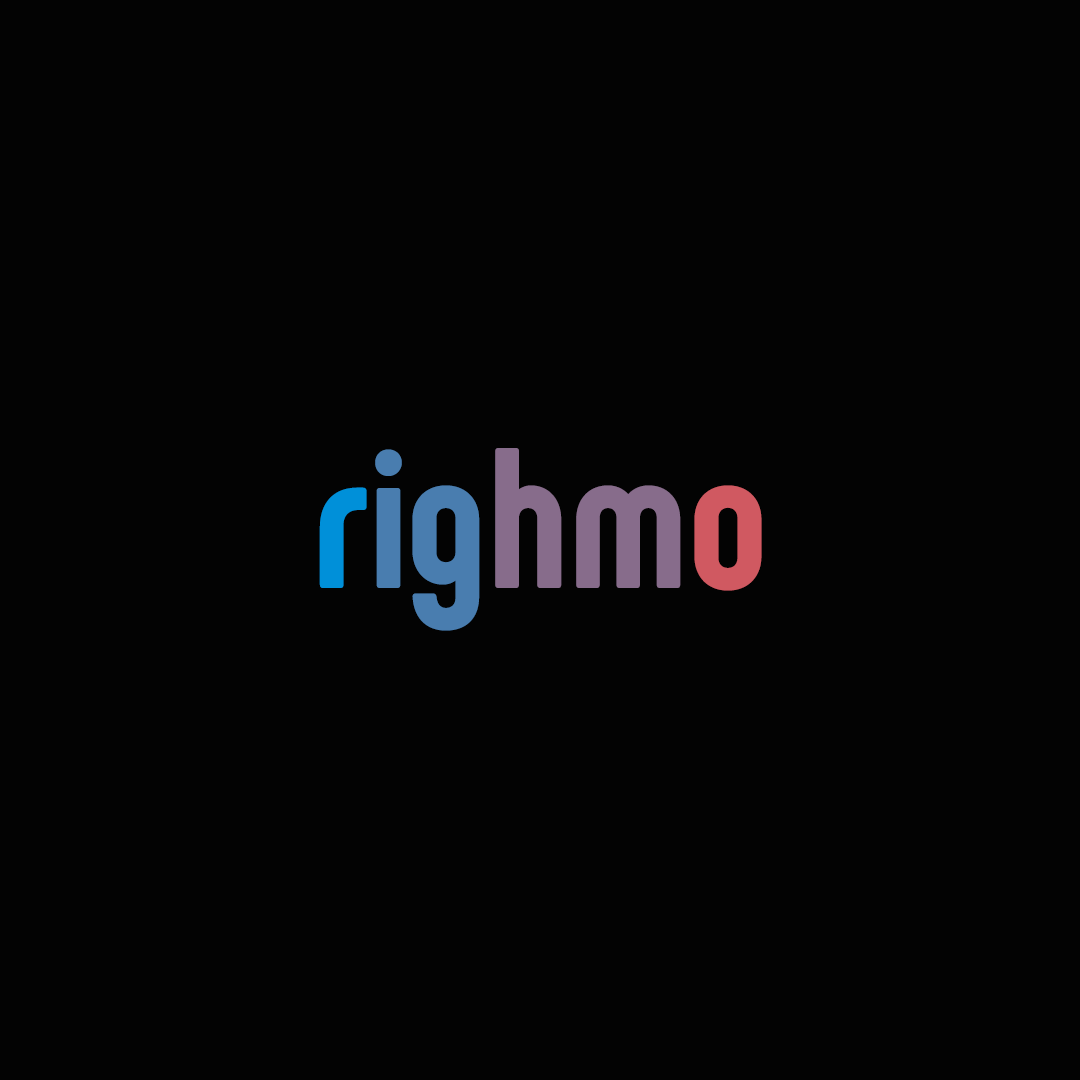
<style>
.page{position:relative;width:1080px;height:1080px;background:#030303}
.page>*{position:absolute;margin:0}
.t1{font:200px "Phenomena-ExtraBold";color:#497daf}
.t2{font:200px "Phenomena-ExtraBold";color:#0090d9}
.t3{font:200px "Phenomena-ExtraBold";color:#876c8b}
.t4{font:200px "Phenomena-ExtraBold";color:#d05961}
</style>
<div class="page">
<p class="t1" style="left:319px;top:448px;width:443px;height:183px"><span class="t2">r</span>ig<span class="t3">hm</span><span class="t4">o</span></p>
</div>
